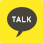
<style>
.page{position:relative;width:43px;height:43px;background:#ffea26}
.page>*{position:absolute;margin:0}
.t1{font:7.2px "Bahnschrift";letter-spacing:0.1em;color:#ffffff}
</style>
<div class="page">
<p class="t1" style="left:12px;top:16px;width:19px;height:7px">TALK</p>
</div>
